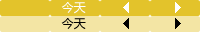
<style>
.page{position:relative;width:200px;height:32px;background:#f3e5a4}
.page>*{position:absolute;margin:0}
.t1{font:12px "MicrosoftYaHei";color:#ffffff}
.t2{font:12px "MicrosoftYaHei";color:#010101}
</style>
<div class="page">
<p class="t1" style="left:61px;top:2px;width:25px;height:12px">今天</p>
<p class="t2" style="left:61px;top:18px;width:25px;height:12px">今天</p>
</div>
